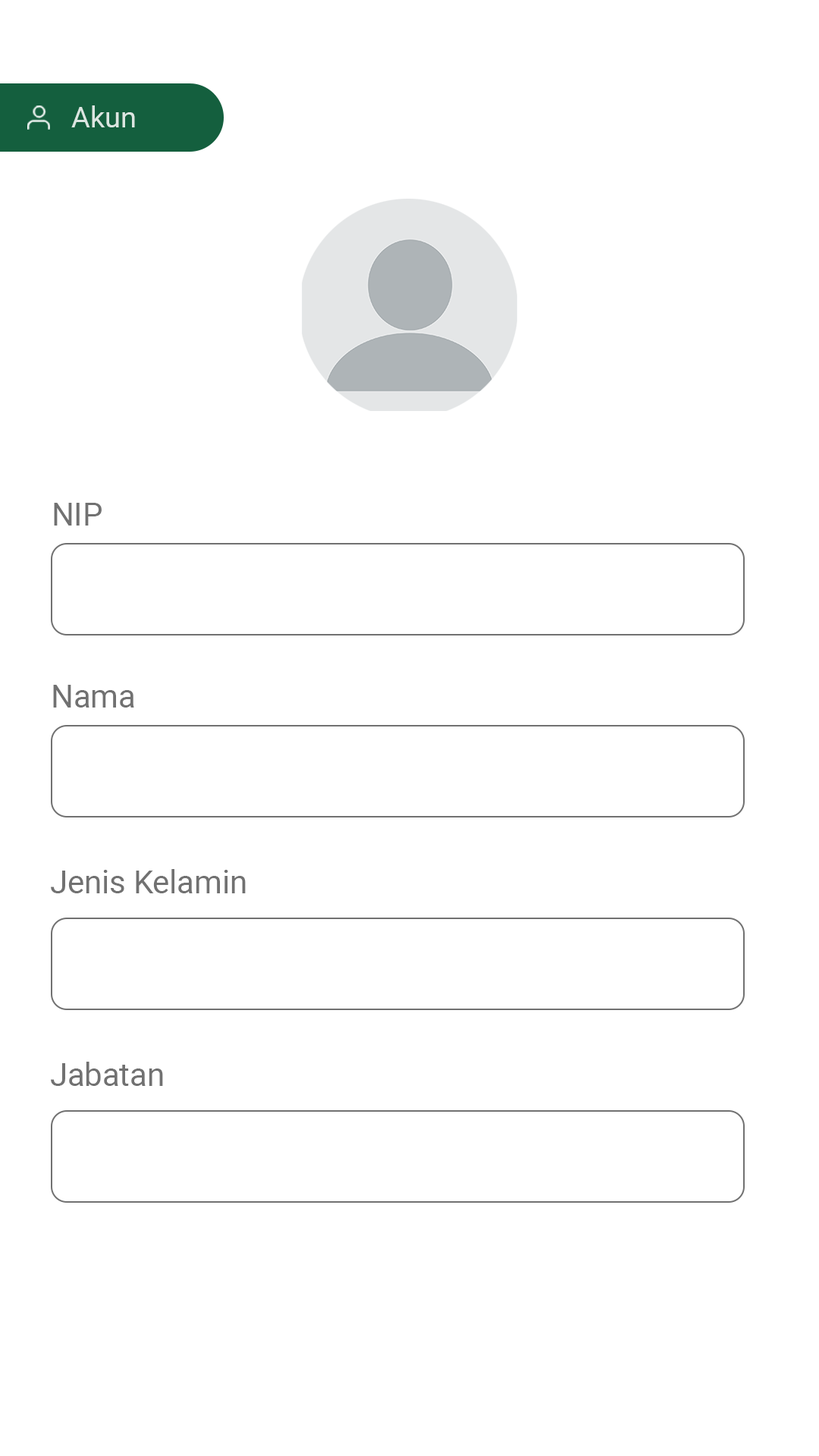
<style>
.page{position:relative;width:819px;height:1456px;background:#ffffff}
.page>*{position:absolute;margin:0}
.t1{font:28.9px "Roboto-Regular";color:#dbe6e1}
.t2{font:31.6px "Roboto-Regular";color:#717171}
</style>
<div class="page">
<p class="t1" style="left:71px;top:105px;width:64px;height:22px">Akun</p>
<p class="t2" style="left:54px;top:503px;width:48px;height:23px">NIP</p>
<p class="t2" style="left:53px;top:685px;width:81px;height:23px">Nama</p>
<p class="t2" style="left:51px;top:869px;width:195px;height:24px">Jenis Kelamin</p>
<p class="t2" style="left:51px;top:1062px;width:112px;height:24px">Jabatan</p>
</div>
